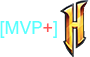
<style>
.page{position:relative;width:90px;height:57px;background:#ffffff}
.page>*{position:absolute;margin:0}
.t1{font:18px "ArialNova";color:#55ffff}
.t2{font:18px "ArialNova";color:#ff5555}
</style>
<div class="page">
<p class="t1" style="left:0px;top:21px;width:57px;height:17px">[MVP<span class="t2">+</span>]</p>
</div>
